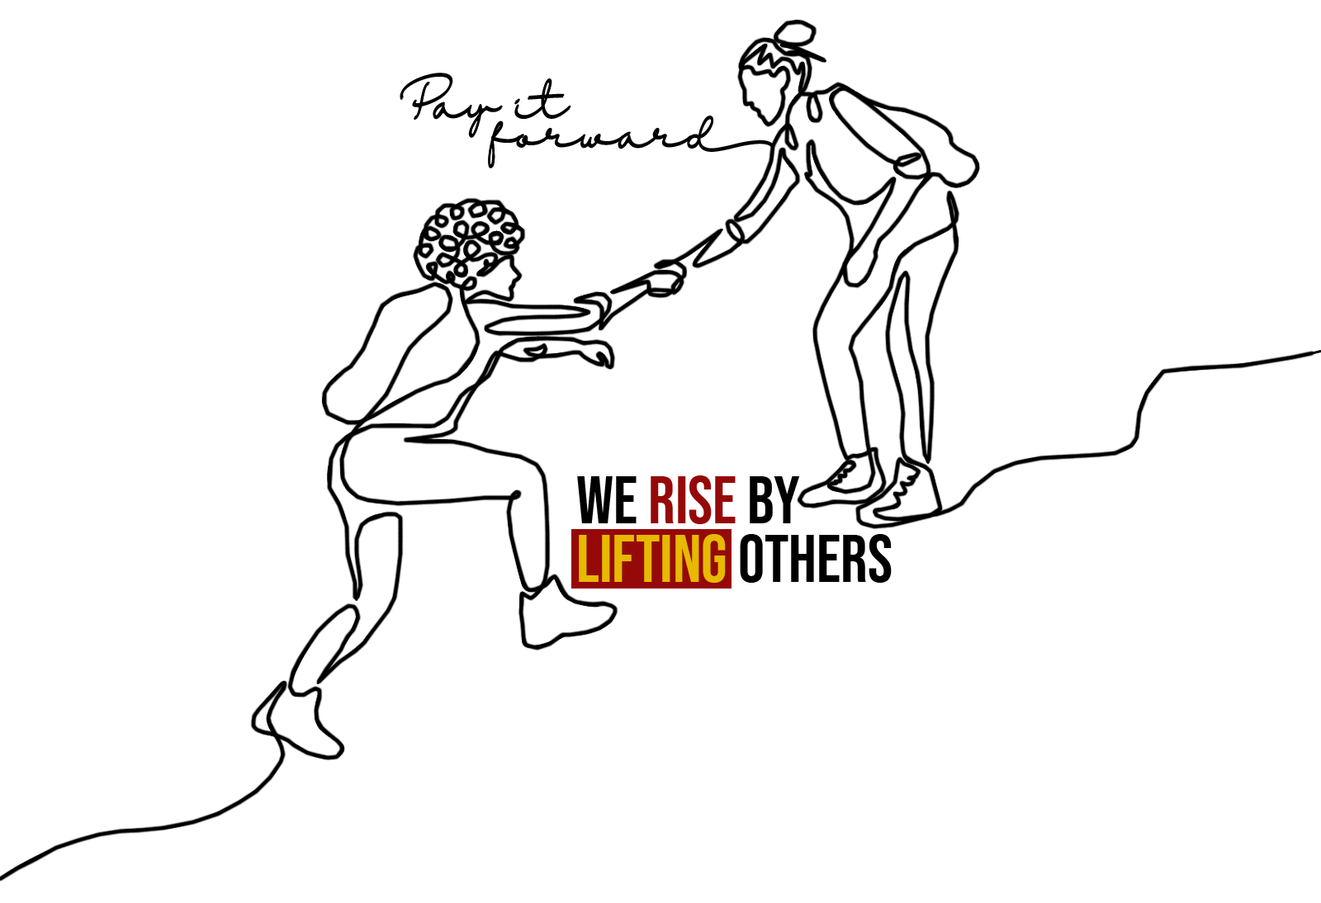
<style>
.page{position:relative;width:1321px;height:903px;background:#ffffff}
.page>*{position:absolute;margin:0}
.t1{font:41.9px/29.7px "HalimunRegular";color:#000000}
.t2{font:60.1px/29.7px "Sudsakorn---Personal-Use";color:#000000}
.t3{font:66.7px/58.6px "BebasNeue-Regular";color:#e7b900}
.t4{font:66.7px/58.6px "BebasNeue-Regular";color:#000000}
.t5{font:66.7px/58.6px "BebasNeue-Regular";color:#960909}
</style>
<div class="page">
<p class="t1" style="left:399px;top:74px;width:374px;height:94px">Pay it <br>      forwar<span class="t2">d</span></p>
<p class="t1" style="left:400px;top:73px;width:373px;height:94px">Pay it <br>      forwar<span class="t2">d</span></p>
<p class="t3" style="left:577px;top:475px;width:314px;height:108px"><span class="t4">We </span><span class="t5">rise</span><span class="t4"> by <br></span>lifting<span class="t4"> others</span></p>
</div>
